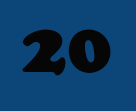
<style>
.page{position:relative;width:136px;height:111px;background:#0c4679}
.page>*{position:absolute;margin:0}
.t1{font:72px "CooperBlackStd";color:#060606}
</style>
<div class="page">
<p class="t1" style="left:22px;top:29px;width:89px;height:47px">20</p>
</div>
